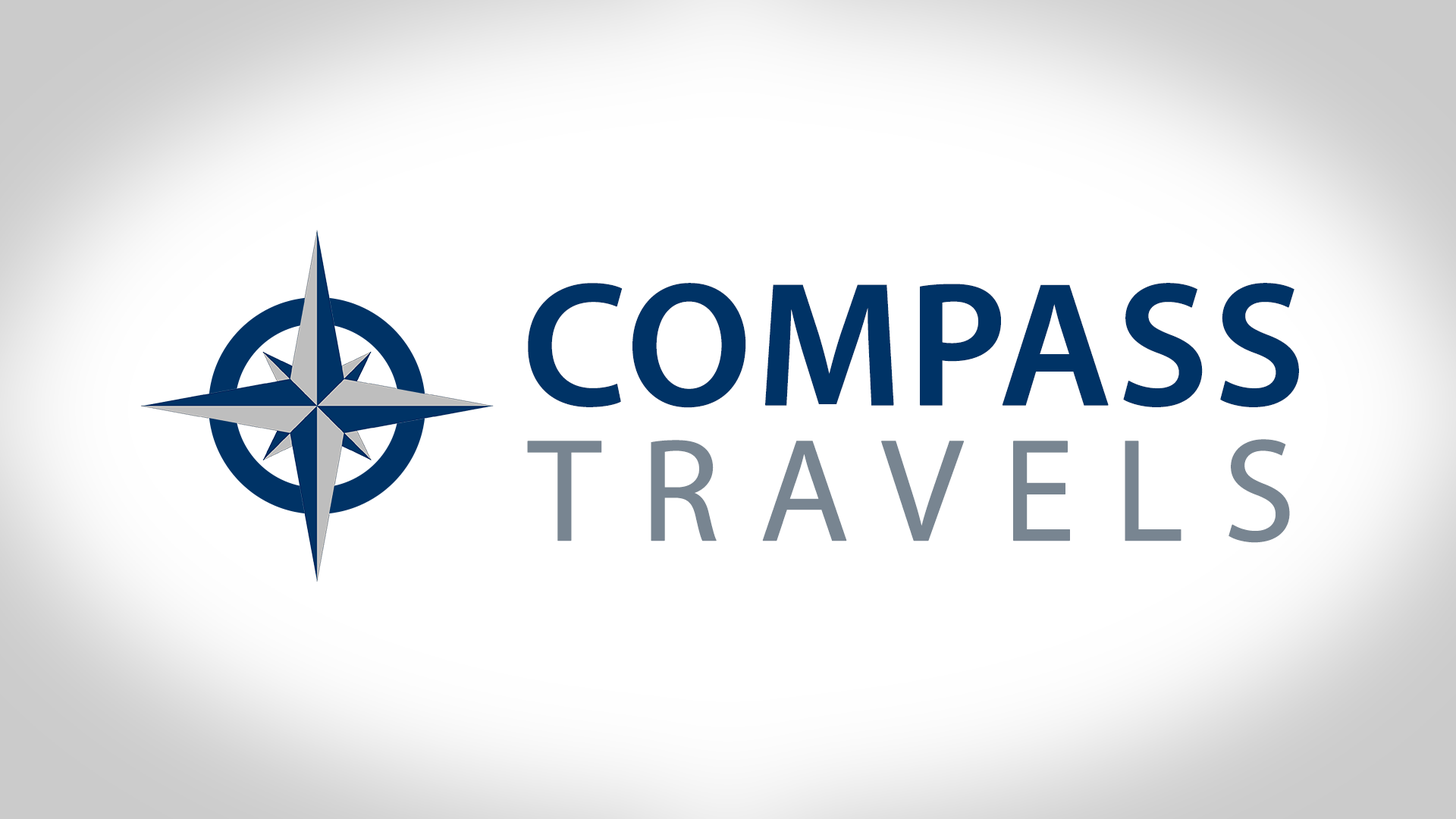
<style>
.page{position:relative;width:1456px;height:819px;background:#ffffff}
.page>*{position:absolute;margin:0}
.t1{font:177.4px "MyriadPro-Semibold";color:#003366;font-weight:bold}
.t2{font:147.1px "MyriadPro-Regular";letter-spacing:0.24em;color:#788591;font-weight:bold}
</style>
<div class="page">
<p class="t1" style="left:528px;top:283px;width:771px;height:125px">COMPASS</p>
<p class="t2" style="left:527px;top:439px;width:763px;height:104px">TRAVELS</p>
</div>
